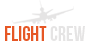
<style>
.page{position:relative;width:91px;height:43px;background:#ffffff}
.page>*{position:absolute;margin:0}
.t1{font:20.5px "BebasNeue";color:#e65725}
.t2{font:20.5px "BebasNeue";color:#e5e4e4}
</style>
<div class="page">
<p class="t1" style="left:5px;top:26px;width:80px;height:15px">FLIGHT <span class="t2">CREW</span></p>
</div>
